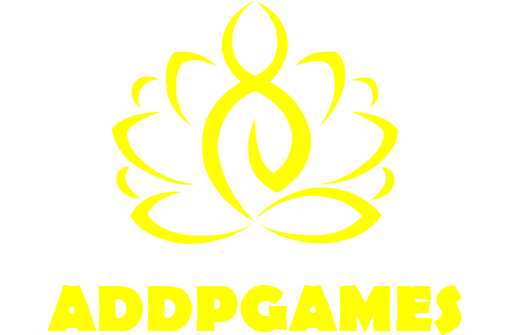
<style>
.page{position:relative;width:512px;height:335px;background:#ffffff}
.page>*{position:absolute;margin:0}
.t1{font:66.4px "BerlinSansFB-Bold";color:#ffff00}
.t2{font:1.3px "BerlinSansFB-Bold";color:#f8f599}
</style>
<div class="page">
<p class="t1" style="left:48px;top:285px;width:414px;height:50px">ADDPGAMES</p>
<p class="t2" style="left:161px;top:312px;width:7px;height:2px">AIGAME</p>
</div>
